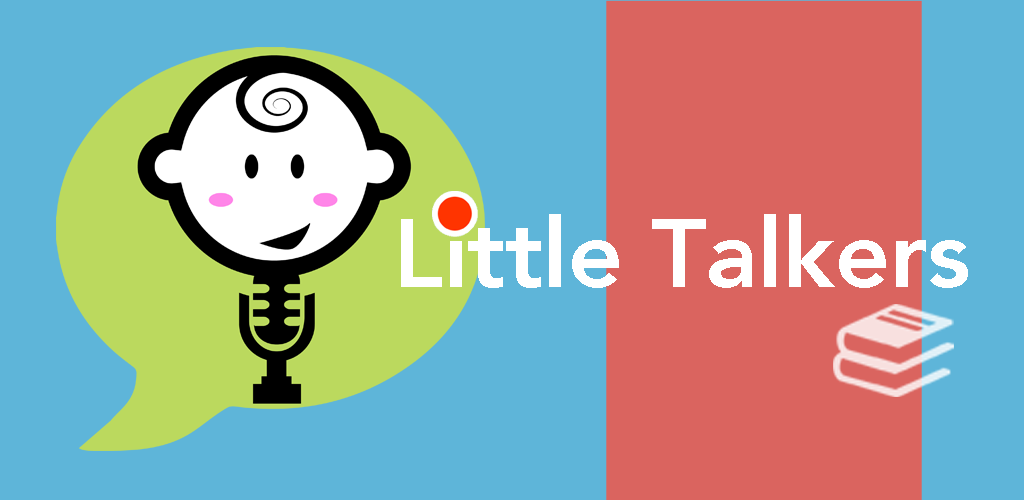
<style>
.page{position:relative;width:1024px;height:500px;background:#5eb5d9}
.page>*{position:absolute;margin:0}
.t1{font:96px "Avenir-Heavy";color:#ffffff}
</style>
<div class="page">
<p class="t1" style="left:401px;top:214px;width:567px;height:74px">Little Talkers</p>
</div>
